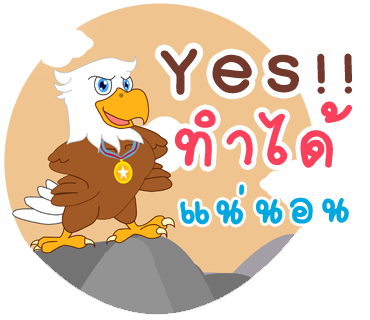
<style>
.page{position:relative;width:370px;height:320px;background:#ffffff}
.page>*{position:absolute;margin:0}
.t1{font:120.4px "2005_iannnnnMTV";letter-spacing:0.075em;color:#72392c;scale:1.09 1}
.t2{font:48.5px "2005iannnnnSOS";letter-spacing:0.075em;color:#000000;scale:1.09 1}
.t3{font:105.4px "2005_iannnnnMTV";letter-spacing:0.075em;color:#72392c;scale:1.09 1}
.t4{font:102px "2005_iannnnnMTV";letter-spacing:0.075em;color:#fa405a;scale:1.06 1}
.t5{font:67px "2005_iannnnnMTV";letter-spacing:0.075em;color:#00a8e1;scale:1.06 1}
</style>
<div class="page">
<p class="t1" style="left:160px;top:48px;width:192px;height:47px"><span class="t2"><br></span>Yes<span class="t3">!!</span></p>
<p class="t4" style="left:175px;top:101px;width:177px;height:67px">ทำได้</p>
<p class="t5" style="left:180px;top:184px;width:169px;height:41px;rotate:-1deg">แน่นอน</p>
</div>
